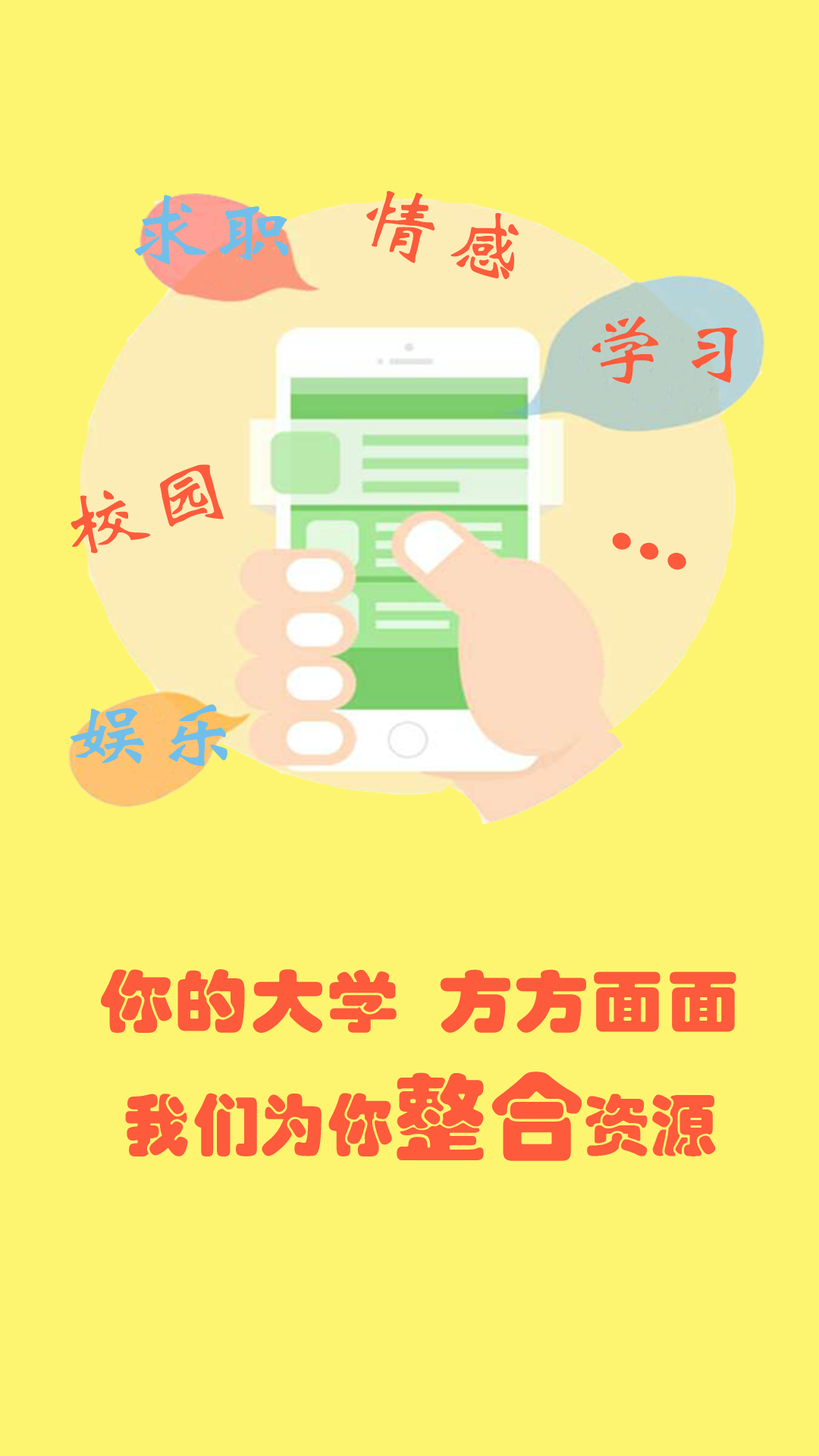
<style>
.page{position:relative;width:819px;height:1456px;background:#fdf570}
.page>*{position:absolute;margin:0}
.t1{font:78.6px "STXinwei";color:#70bfea;scale:1.12 1}
.t2{font:78.6px "STXinwei";color:#fd5b3c;scale:1.12 1}
.t3{font:78.6px "STXinwei";color:#fd5b3c;scale:1.13 1}
.t4{font:78.6px "STHupo";color:#fd5b3c;scale:1.12 1}
.t5{font:67.4px "STHupo";color:#fd5b3c;scale:1.13 1}
.t6{font:67.4px "STHupo";color:#fd5b3c}
.t7{font:94.8px "STHupo";color:#fd5b3c}
</style>
<div class="page">
<p class="t1" style="left:134px;top:195px;width:155px;height:70px">求职</p>
<p class="t2" style="left:366px;top:191px;width:153px;height:88px;rotate:15deg">情感</p>
<p class="t2" style="left:591px;top:316px;width:146px;height:68px">学习</p>
<p class="t3" style="left:71px;top:464px;width:153px;height:90px;rotate:-15deg">校园</p>
<p class="t4" style="left:612px;top:532px;width:74px;height:38px;rotate:20deg">…</p>
<p class="t1" style="left:70px;top:704px;width:157px;height:62px">娱乐</p>
<p class="t5" style="left:101px;top:969px;width:635px;height:64px">你的大学  方方面面</p>
<p class="t6" style="left:125px;top:1072px;width:591px;height:89px">我们为你<span class="t7">整合</span>资源</p>
</div>
